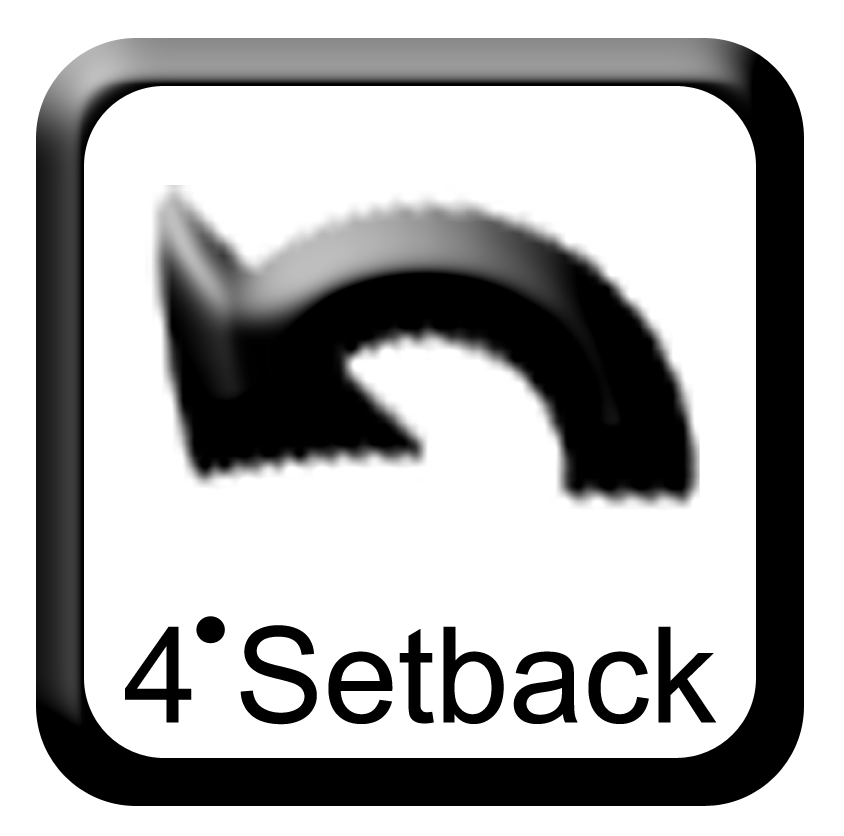
<style>
.page{position:relative;width:844px;height:836px;background:#ffffff}
.page>*{position:absolute;margin:0}
.t1{font:133.3px "ArialMT";color:#000000}
</style>
<div class="page">
<p class="t1" style="left:125px;top:625px;width:592px;height:100px">4 Setback</p>
</div>
